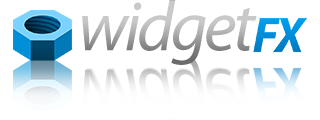
<style>
.page{position:relative;width:320px;height:120px;background:#ffffff}
.page>*{position:absolute;margin:0}
.t1{font:70.8px "MyriadPro-It";letter-spacing:-0.05em}
</style>
<div class="page">
<p class="t1" style="left:82px;top:0px;width:175px;height:65px">widget</p>
</div>
